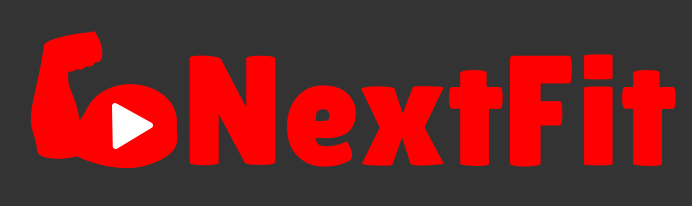
<style>
.page{position:relative;width:692px;height:206px;background:#333333}
.page>*{position:absolute;margin:0}
.t1{font:156px "LilitaOne";color:#ff0000}
</style>
<div class="page">
<p class="t1" style="left:189px;top:54px;width:487px;height:113px">NextFit</p>
</div>
